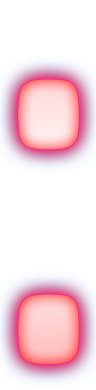
<style>
.page{position:relative;width:96px;height:390px;background:#ffffff}
.page>*{position:absolute;margin:0}
.t1{font:481.8px "76London";letter-spacing:0.025em;scale:0.76 1}
</style>
<div class="page">
<p class="t1" style="left:18px;top:79px;width:61px;height:285px">:</p>
<p class="t1" style="left:18px;top:79px;width:61px;height:285px">:</p>
</div>
